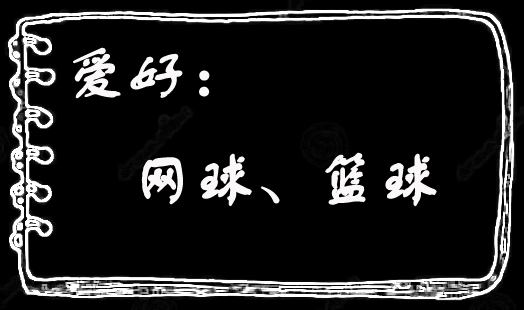
<style>
.page{position:relative;width:524px;height:310px;background:#000000}
.page>*{position:absolute;margin:0}
.t1{font:60px "FZSTK--GBK1-0";color:#faf8f8;font-weight:bold}
</style>
<div class="page">
<p class="t1" style="left:73px;top:47px;width:364px;height:160px">爱好：<br>    网球、篮球</p>
</div>
